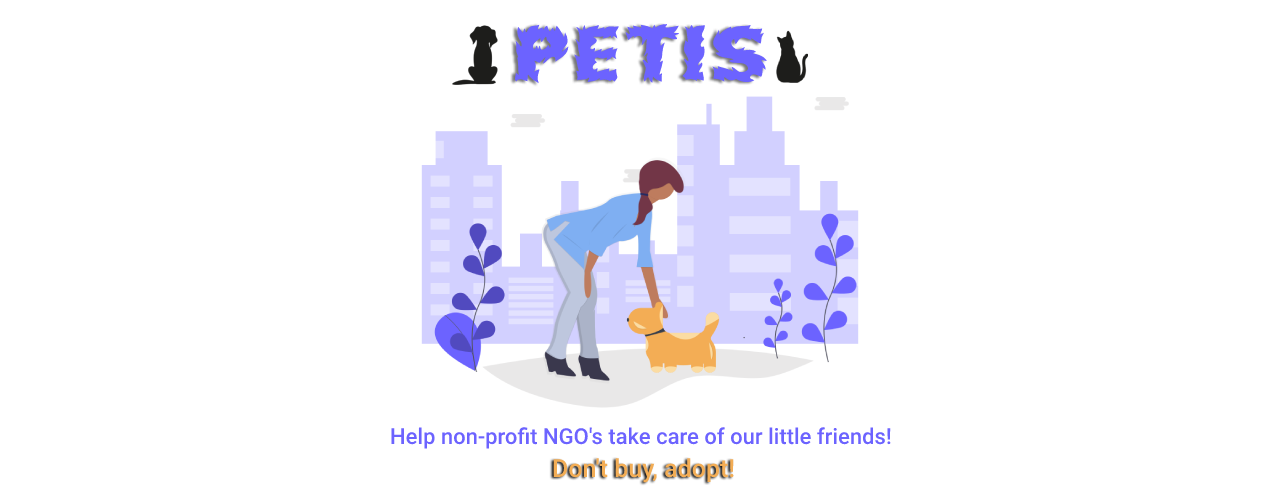
<style>
.page{position:relative;width:1280px;height:500px;background:#ffffff}
.page>*{position:absolute;margin:0}
.t1{font:62px "FirecatMedium";color:#6c63ff}
.t2{font:22px "Roboto-Medium";color:#6c63ff}
.t3{font:25px "Roboto-Medium";color:#f3ad55}
</style>
<div class="page">
<p class="t1" style="left:515px;top:24px;width:252px;height:60px">Petis</p>
<p class="t2" style="left:391px;top:427px;width:500px;height:22px">Help non-profit NGO's take care of our little friends!</p>
<p class="t3" style="left:553px;top:458px;width:181px;height:25px">Don't buy, adopt!</p>
</div>
